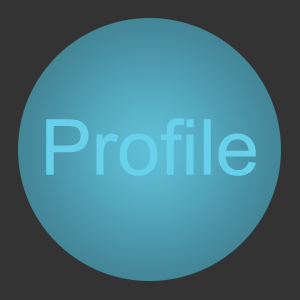
<style>
.page{position:relative;width:300px;height:300px;background:#333333}
.page>*{position:absolute;margin:0}
.t1{font:118.3px "BrowalliaNew";color:#67d0eb}
</style>
<div class="page">
<p class="t1" style="left:46px;top:118px;width:210px;height:58px">Profile</p>
</div>
